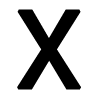
<style>
.page{position:relative;width:100px;height:100px;background:#ffffff}
.page>*{position:absolute;margin:0}
.t1{font:107px "Roboto-Regular";letter-spacing:-0.08em;color:#000000;font-weight:bold}
</style>
<div class="page">
<p class="t1" style="left:17px;top:9px;width:64px;height:81px">X</p>
</div>
